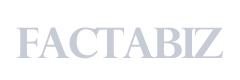
<style>
.page{position:relative;width:240px;height:80px;background:#ffffff}
.page>*{position:absolute;margin:0}
.t1{font:42px "PerpetuaTitlingMT-Bold";letter-spacing:-0.06em;color:#c7cbd6}
</style>
<div class="page">
<p class="t1" style="left:16px;top:27px;width:207px;height:32px">FACTABIZ</p>
</div>
